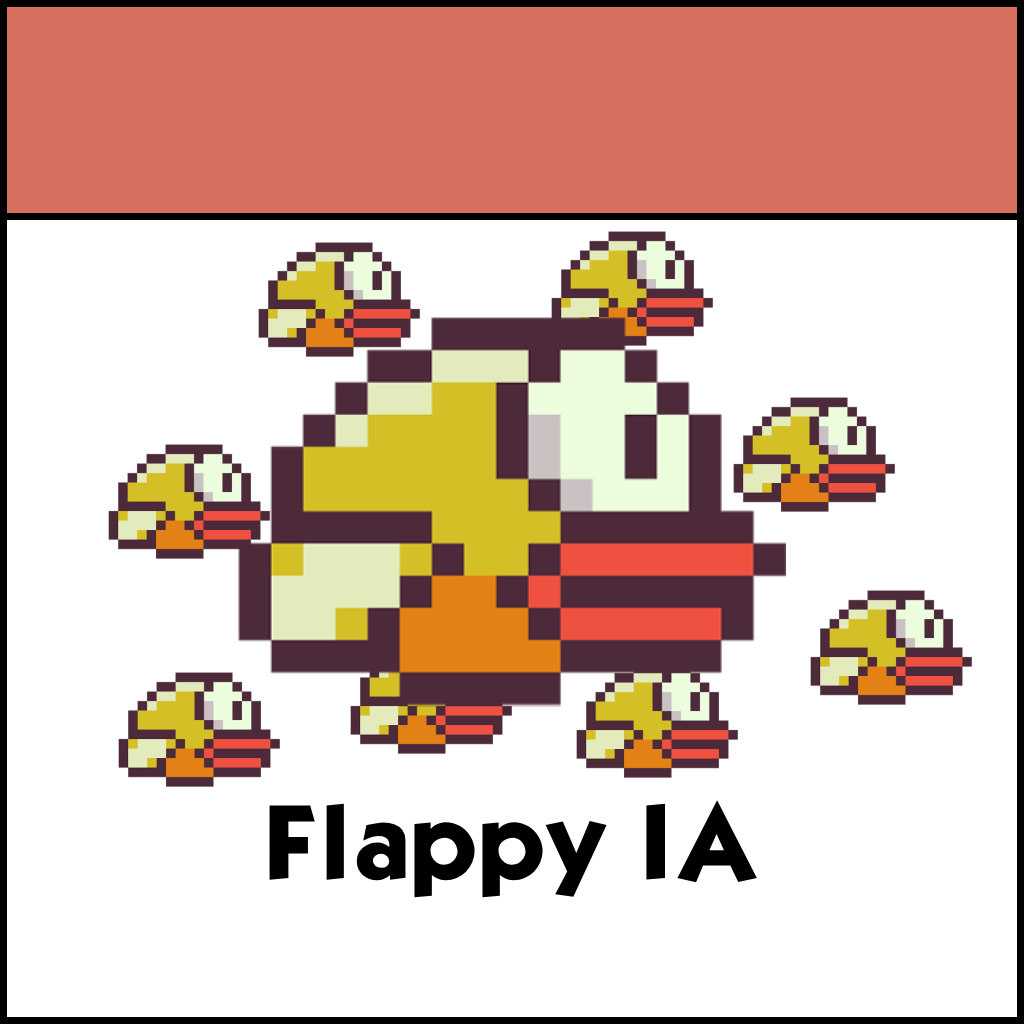
<style>
.page{position:relative;width:1024px;height:1024px;background:#ffffff}
.page>*{position:absolute;margin:0}
.t1{font:90px "KabelBdNormal";color:#000000}
</style>
<div class="page">
<p class="t1" style="left:269px;top:800px;width:488px;height:98px">Flappy IA</p>
</div>
